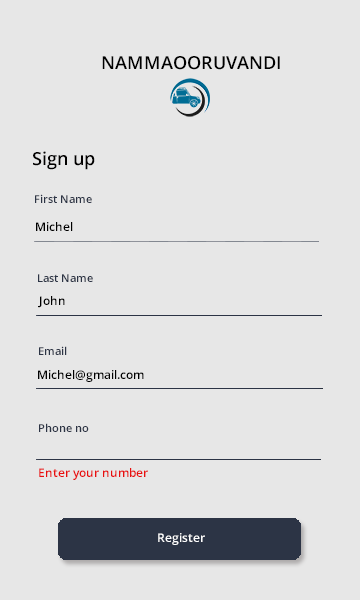
<style>
.page{position:relative;width:360px;height:600px;background:#e7e7e7}
.page>*{position:absolute;margin:0}
.t1{font:18px "OpenSans-Semibold";color:#000000}
.t2{font:18px "OpenSans-Semibold";color:#020000}
.t3{font:11px "OpenSans-Semibold";color:#2c3445}
.t4{font:12px "OpenSans-Semibold";color:#000000}
.t5{font:12px "OpenSans-Semibold";color:#e80f0f}
.t6{font:12px "OpenSans-Semibold";color:#ffffff}
</style>
<div class="page">
<p class="t1" style="left:102px;top:56px;width:178px;height:14px">NAMMAOORUVANDI</p>
<p class="t2" style="left:33px;top:151px;width:62px;height:19px">Sign up</p>
<p class="t3" style="left:35px;top:194px;width:57px;height:9px">First Name</p>
<p class="t4" style="left:36px;top:222px;width:37px;height:9px">Michel</p>
<p class="t3" style="left:38px;top:274px;width:55px;height:8px">Last Name</p>
<p class="t4" style="left:38px;top:296px;width:27px;height:12px">John</p>
<p class="t3" style="left:39px;top:346px;width:28px;height:9px">Email</p>
<p class="t4" style="left:38px;top:370px;width:106px;height:12px">Michel@gmail.com</p>
<p class="t3" style="left:39px;top:423px;width:50px;height:9px">Phone no</p>
<p class="t5" style="left:39px;top:468px;width:109px;height:12px">Enter your number</p>
<p class="t6" style="left:158px;top:533px;width:47px;height:12px">Register</p>
</div>
